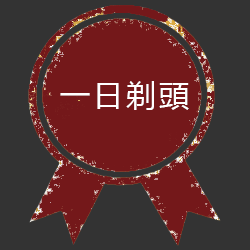
<style>
.page{position:relative;width:250px;height:250px;background:#333333}
.page>*{position:absolute;margin:0}
.t1{font:30px "MicrosoftYaHei";letter-spacing:0.1em;color:#ffffff}
</style>
<div class="page">
<p class="t1" style="left:60px;top:81px;width:129px;height:29px">一日剃頭</p>
</div>
